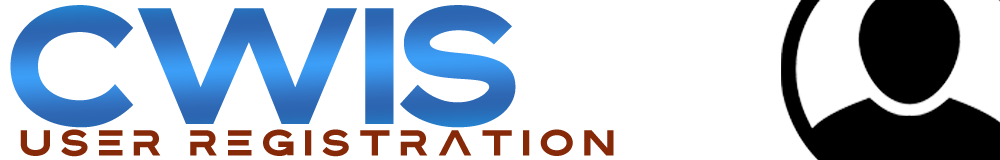
<style>
.page{position:relative;width:1000px;height:160px;background:#ffffff}
.page>*{position:absolute;margin:0}
.t1{font:145.8px "Bristone";letter-spacing:-0.04em}
.t2{font:31.7px "Bristone";letter-spacing:0.24em;color:#862908;scale:1.05 1}
</style>
<div class="page">
<p class="t1" style="left:10px;top:5px;width:506px;height:123px">cwis</p>
<p class="t2" style="left:20px;top:129px;width:594px;height:28px">user registration</p>
</div>
